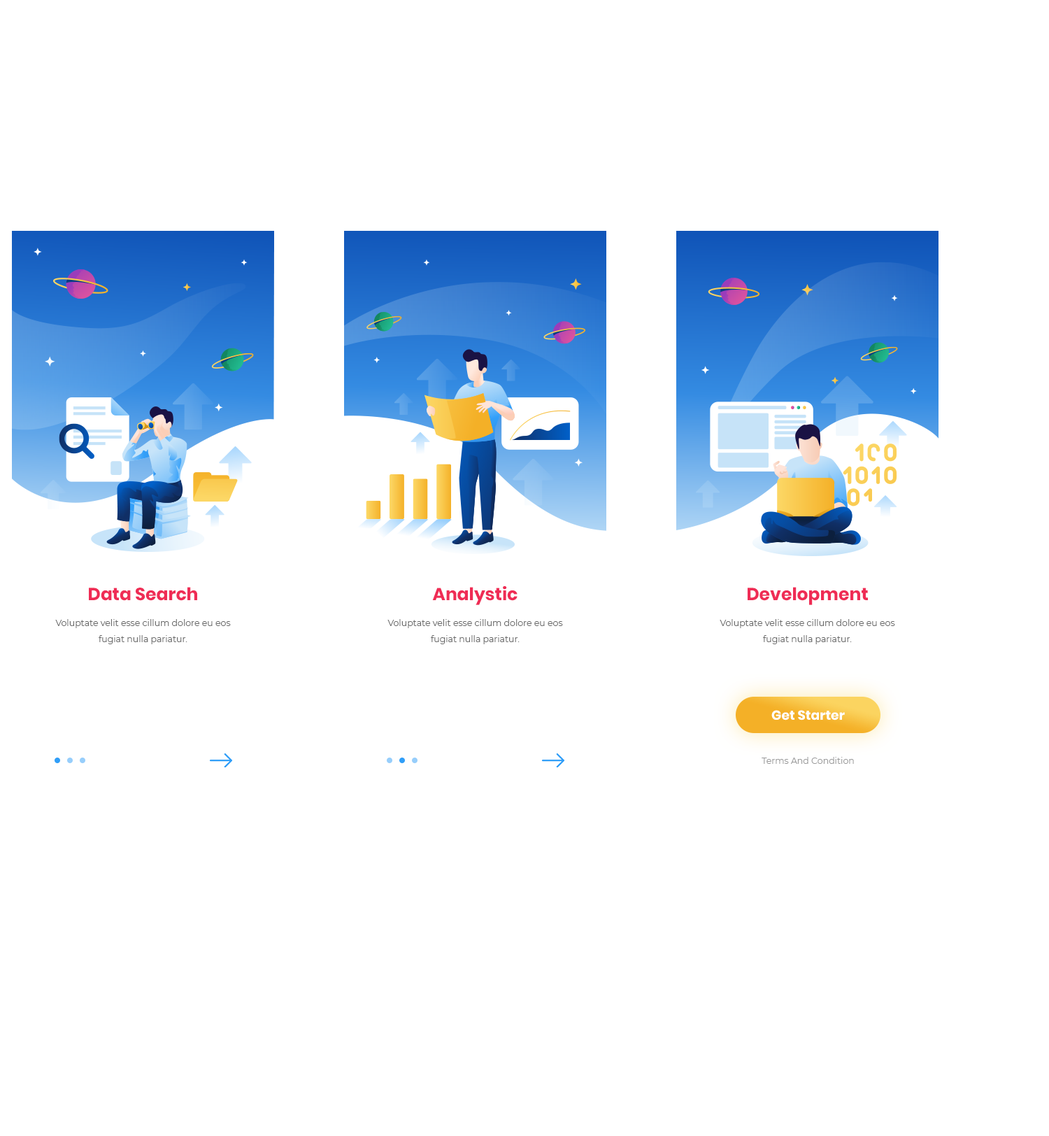
<style>
.page{position:relative;width:1049px;height:1136px;background:#ffffff}
.page>*{position:absolute;margin:0}
.t1{font:17.5px "Poppins-Bold";color:#ef2c55}
.t2{font:8.7px/16px "Montserrat-Regular";color:#6a6a6a}
.t3{font:13.1px "Poppins-Bold";color:#ffffff}
.t4{font:8.7px "Montserrat-Regular";color:#9a9a9a}
</style>
<div class="page">
<p class="t1" style="left:89px;top:587px;width:108px;height:14px">Data Search</p>
<p class="t1" style="left:432px;top:586px;width:86px;height:19px">Analystic</p>
<p class="t1" style="left:748px;top:587px;width:120px;height:18px">Development</p>
<p class="t2" style="left:55px;top:619px;width:176px;height:25px;text-align:center">Voluptate velit esse cillum dolore eu eos fugiat nulla pariatur.</p>
<p class="t2" style="left:388px;top:619px;width:175px;height:25px;text-align:center">Voluptate velit esse cillum dolore eu eos fugiat nulla pariatur.</p>
<p class="t2" style="left:720px;top:619px;width:176px;height:25px;text-align:center">Voluptate velit esse cillum dolore eu eos fugiat nulla pariatur.</p>
<p class="t3" style="left:772px;top:710px;width:73px;height:11px">Get Starter</p>
<p class="t4" style="left:762px;top:757px;width:92px;height:7px">Terms And Condition</p>
</div>
